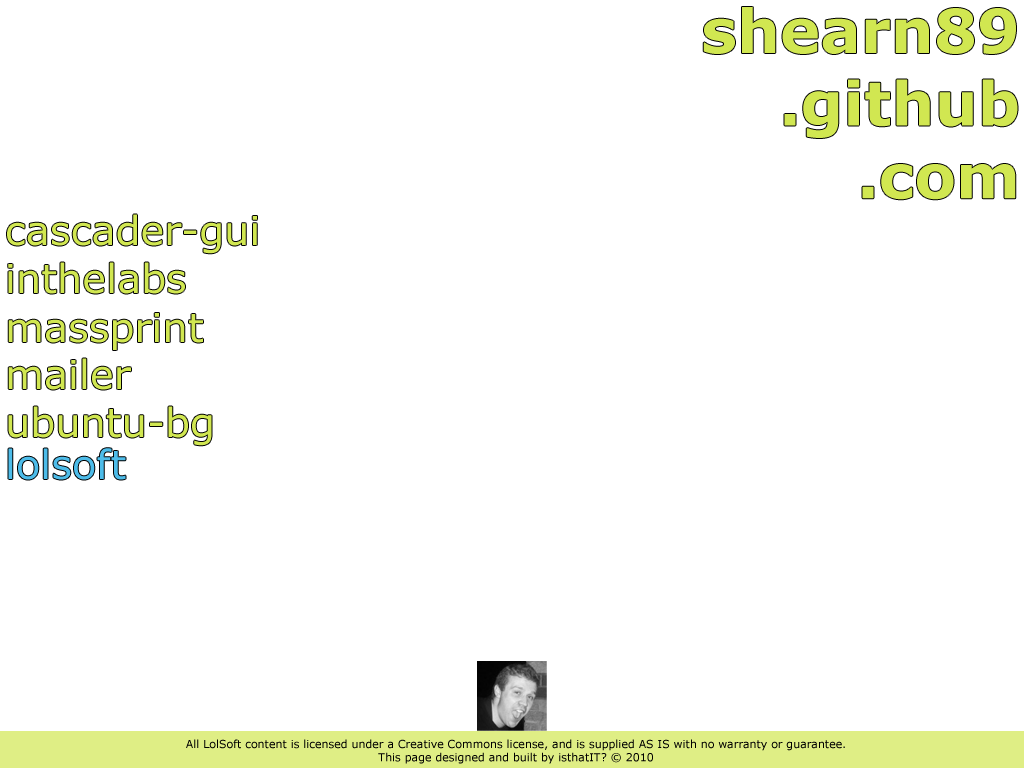
<style>
.page{position:relative;width:1024px;height:768px;background:#ffffff}
.page>*{position:absolute;margin:0}
.t1{font:60.5px "Verdana-Bold";color:#d1e751}
.t2{font:40px "Verdana";color:#d1e751}
.t3{font:40px "Verdana";color:#4dbce9}
.t4{font:11px "Verdana";color:#000000}
</style>
<div class="page">
<p class="t1" style="left:703px;top:7px;width:315px;height:193px;text-align:right">shearn89<br>.github<br>.com</p>
<p class="t2" style="left:7px;top:214px;width:250px;height:40px">cascader-gui</p>
<p class="t2" style="left:8px;top:262px;width:177px;height:32px">inthelabs</p>
<p class="t2" style="left:8px;top:313px;width:195px;height:37px">massprint</p>
<p class="t2" style="left:8px;top:358px;width:123px;height:32px">mailer</p>
<p class="t2" style="left:8px;top:406px;width:204px;height:40px">ubuntu-bg</p>
<p class="t3" style="left:8px;top:448px;width:118px;height:32px">lolsoft</p>
<p class="t4" style="left:186px;top:739px;width:659px;height:25px;text-align:center">All LolSoft content is licensed under a Creative Commons license, and is supplied AS IS with no warranty or guarantee.<br>This page designed and built by isthatIT? © 2010</p>
</div>
